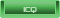
<style>
.page{position:relative;width:60px;height:18px;background:#70d377}
.page>*{position:absolute;margin:0}
.t1{font:9px "Bitsumishi";color:#b5e0b5}
</style>
<div class="page">
<p class="t1" style="left:23px;top:7px;width:14px;height:6px">iCq</p>
</div>
